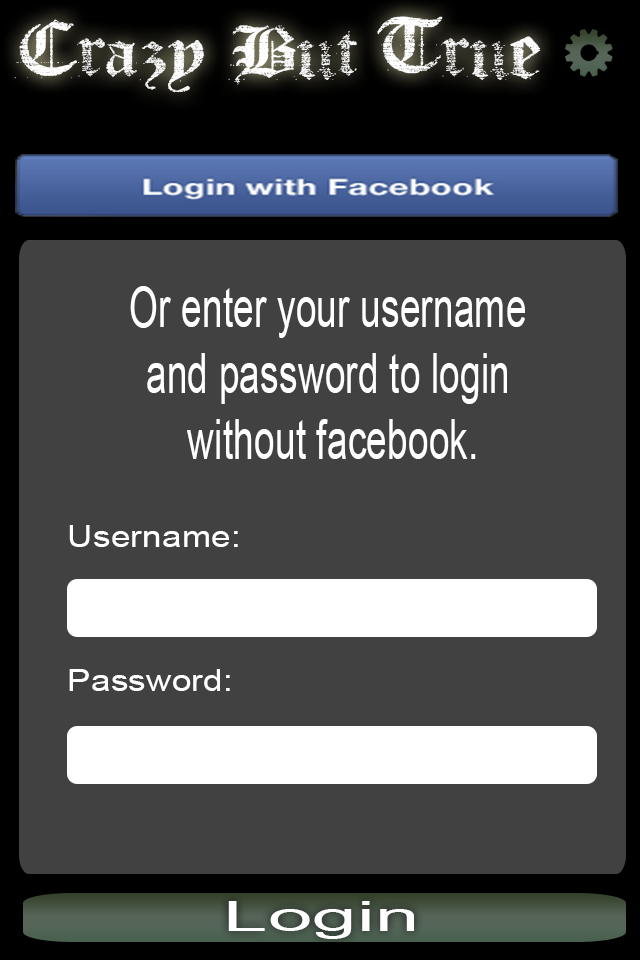
<style>
.page{position:relative;width:640px;height:960px;background:#414141}
.page>*{position:absolute;margin:0}
.t1{font:72px "Faith-Collapsing";color:#ffffff;scale:1.18 1}
.t2{font:55px "ArialMT";color:#ffffff;scale:0.68 1}
.t3{font:40.6px "ArialMT";color:#ffffff;scale:1.98 1}
</style>
<div class="page">
<p class="t1" style="left:14px;top:16px;width:527px;height:77px">Crazy But True</p>
<p class="t2" style="left:130px;top:286px;width:395px;height:173px;text-align:center">Or enter your username <br>and password to login <br>without facebook.</p>
<p class="t3" style="left:228px;top:901px;width:186px;height:38px">Login</p>
</div>
